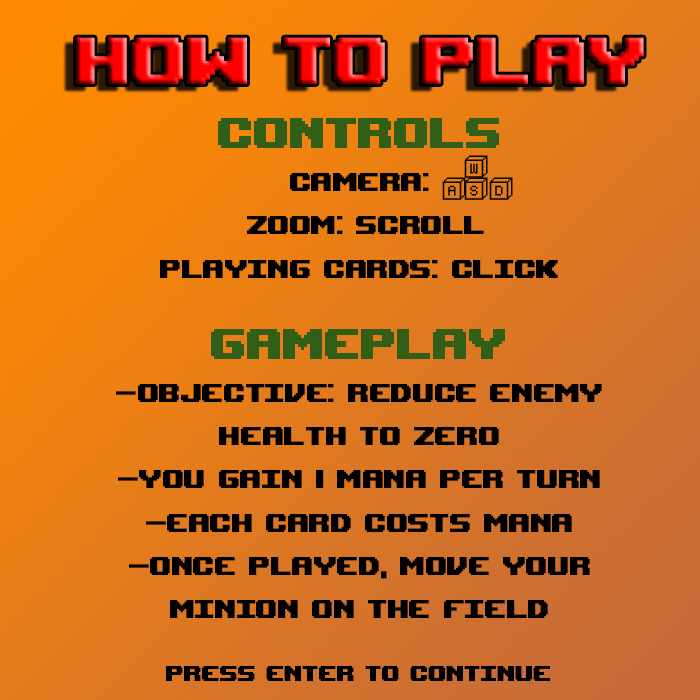
<style>
.page{position:relative;width:700px;height:700px}
.page>*{position:absolute;margin:0}
.t1{font:92.2px "UpheavalTT-BRK-"}
.t2{font:36px "UpheavalTT-BRK-";color:#000000}
.t3{font:60px "UpheavalTT-BRK-";color:#325f17}
.t4{font:30px "UpheavalTT-BRK-";color:#000000}
</style>
<div class="page">
<p class="t1" style="left:76px;top:37px;width:568px;height:47px">How To play</p>
<p class="t2" style="left:160px;top:118px;width:398px;height:160px;text-align:center"><span class="t3">Controls<br></span>Camera:<br> Zoom: Scroll<br>Playing Cards: Click</p>
<p class="t2" style="left:116px;top:329px;width:486px;height:289px;text-align:center"><span class="t3">GamePlay<br></span>-Objective: reduce Enemy health to zero<br>-You gain 1 mana per turn<br>-each Card costs mana<br>-once played, move your minion on the field</p>
<p class="t4" style="left:166px;top:666px;width:384px;height:15px">Press enter to continue</p>
</div>
